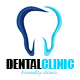
<style>
.page{position:relative;width:80px;height:80px;background:#ffffff}
.page>*{position:absolute;margin:0}
.t1{font:12.5px "Impact";color:#020202}
.t2{font:12.5px "Impact";color:#00d2f8}
.t3{font:4.2px "LucidaHandwriting-Italic";color:#93def1}
</style>
<div class="page">
<p class="t1" style="left:6px;top:59px;width:36px;height:10px">DENTAL</p>
<p class="t2" style="left:41px;top:59px;width:33px;height:10px">CLINIC</p>
<p class="t3" style="left:21px;top:70px;width:37px;height:6px">Friendly clinic</p>
</div>
